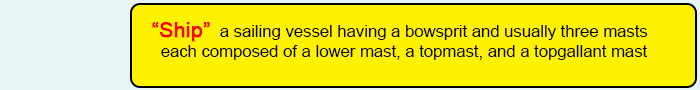
<style>
.page{position:relative;width:700px;height:90px;background:#fff200}
.page>*{position:absolute;margin:0}
.t1{font:16.7px "ArialMT";color:#020202}
.t2{font:20.8px "ArialMT";color:#fd010d;font-weight:bold}
</style>
<div class="page">
<p class="t1" style="left:152px;top:22px;width:496px;height:38px"><span class="t2">“Ship”</span>  a sailing vessel having a bowsprit and usually three masts <br>  each composed of a lower mast, a topmast, and a topgallant mast</p>
</div>
